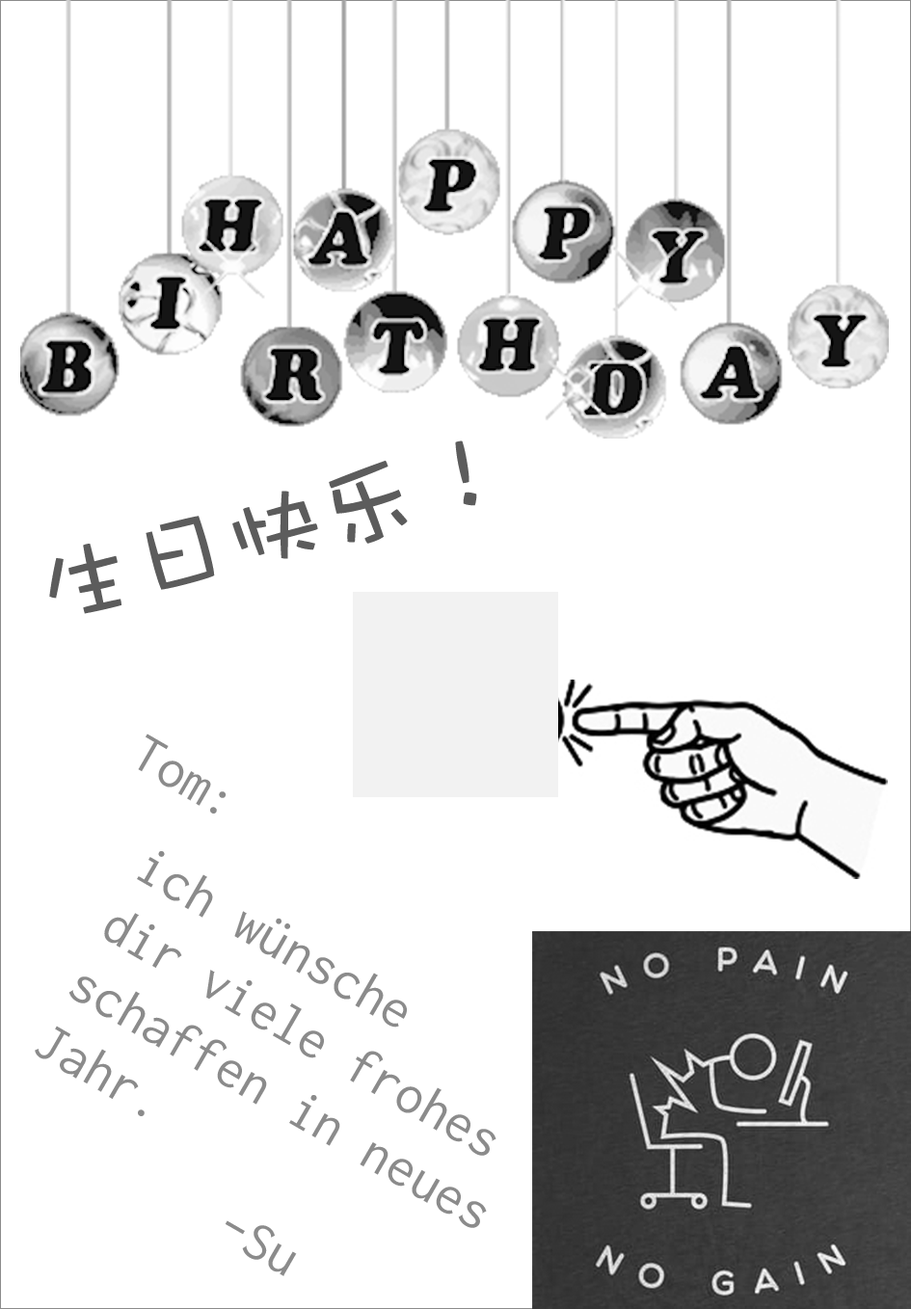
<style>
.page{position:relative;width:911px;height:1309px;background:#ffffff}
.page>*{position:absolute;margin:0}
.t1{font:97.9px "DFWaWaSC-W5";color:#5c5c5c}
.t2{font:56.2px "Inconsolata";color:#8b8b8b}
</style>
<div class="page">
<p class="t1" style="left:49px;top:441px;width:428px;height:173px;rotate:-15deg">生日快乐！</p>
<p class="t2" style="left:138px;top:734px;width:89px;height:80px;rotate:30deg">Tom:</p>
<p class="t2" style="left:35px;top:851px;width:461px;height:377px;rotate:30deg">ich wünsche <br>dir viele frohes schaffen in neues Jahr.</p>
<p class="t2" style="left:225px;top:1220px;width:72px;height:56px;rotate:30deg">-Su</p>
</div>
